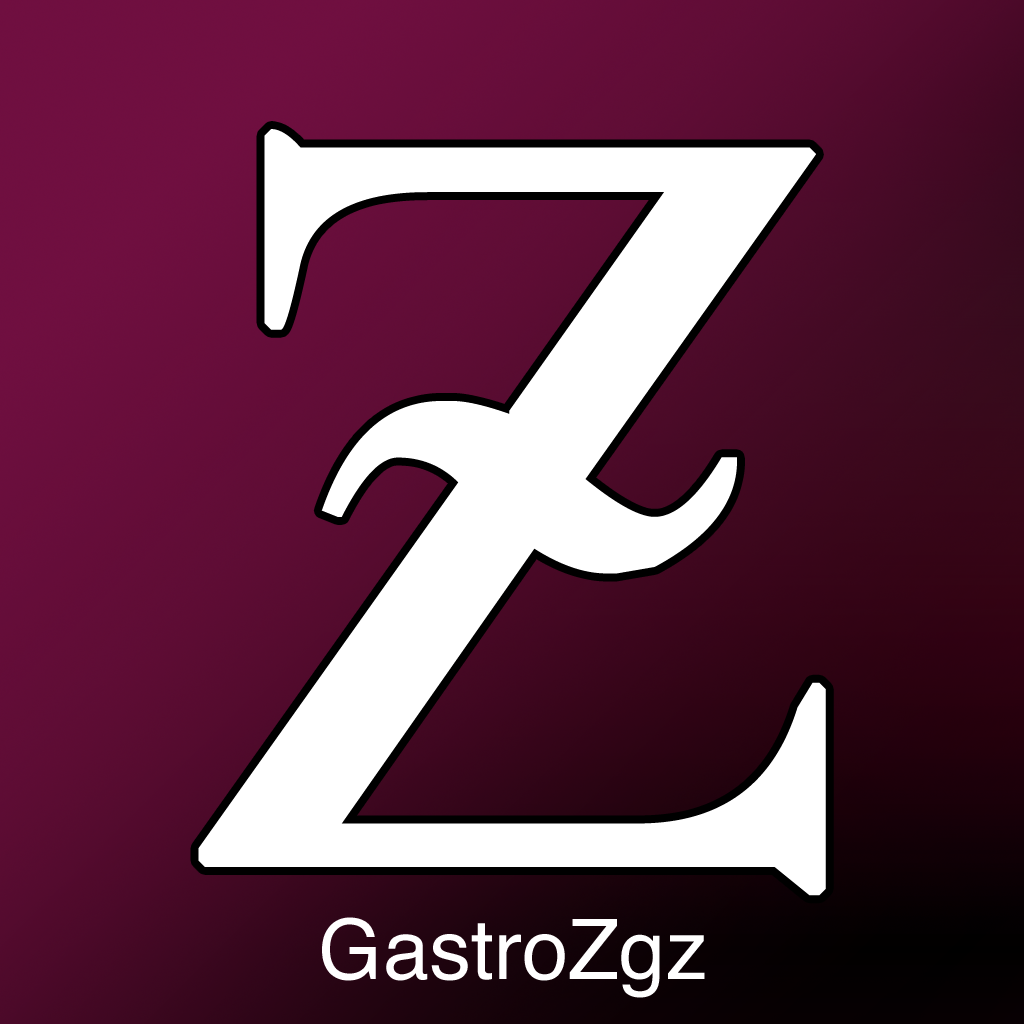
<style>
.page{position:relative;width:1024px;height:1024px}
.page>*{position:absolute;margin:0}
.t1{font:1083.3px "Romance-Fatal-Serif";color:#ffffff}
.t2{font:83.3px "Helvetica";color:#ffffff}
</style>
<div class="page">
<p class="t1" style="left:198px;top:129px;width:628px;height:767px">Z</p>
<p class="t2" style="left:322px;top:917px;width:383px;height:81px">GastroZgz</p>
</div>
